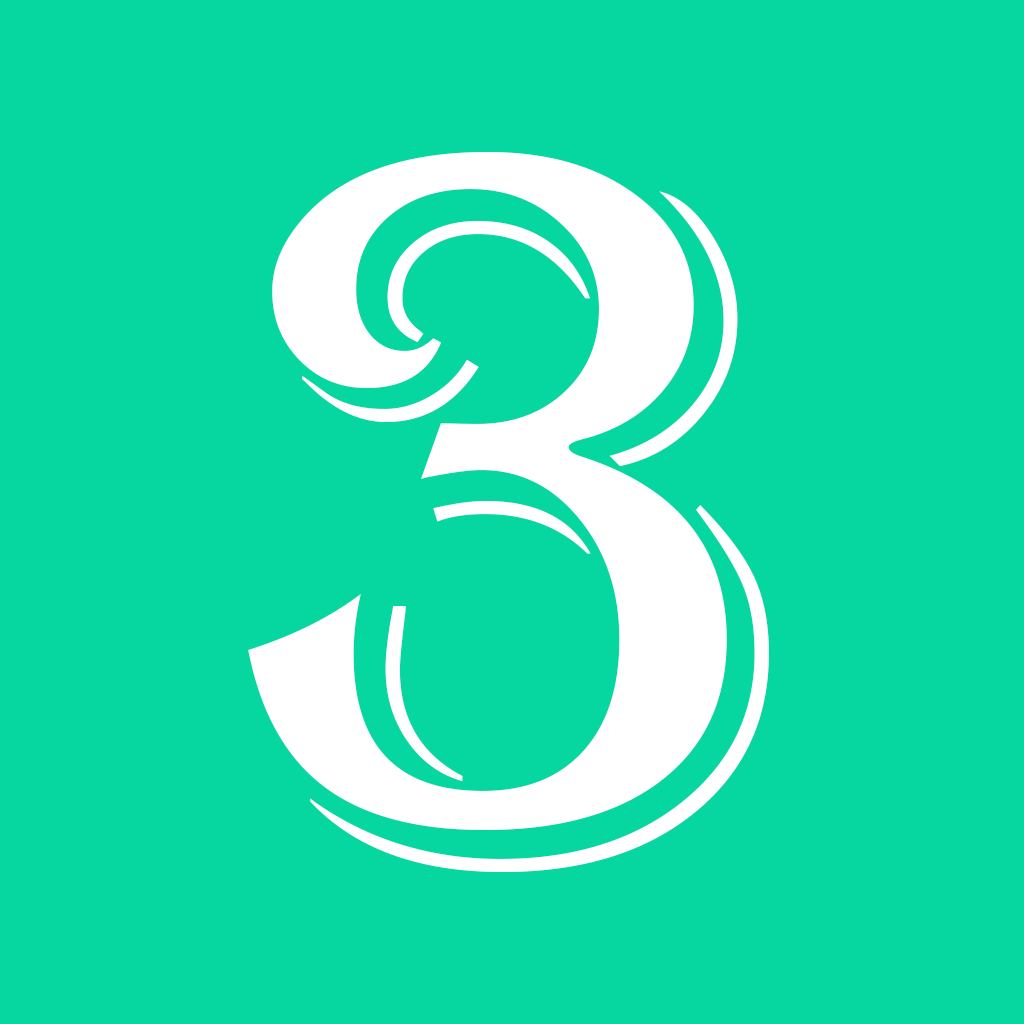
<style>
.page{position:relative;width:1024px;height:1024px;background:#06d6a0}
.page>*{position:absolute;margin:0}
.t1{font:1041px "Algerian";color:#ffffff}
</style>
<div class="page">
<p class="t1" style="left:248px;top:152px;width:521px;height:720px">3</p>
</div>
